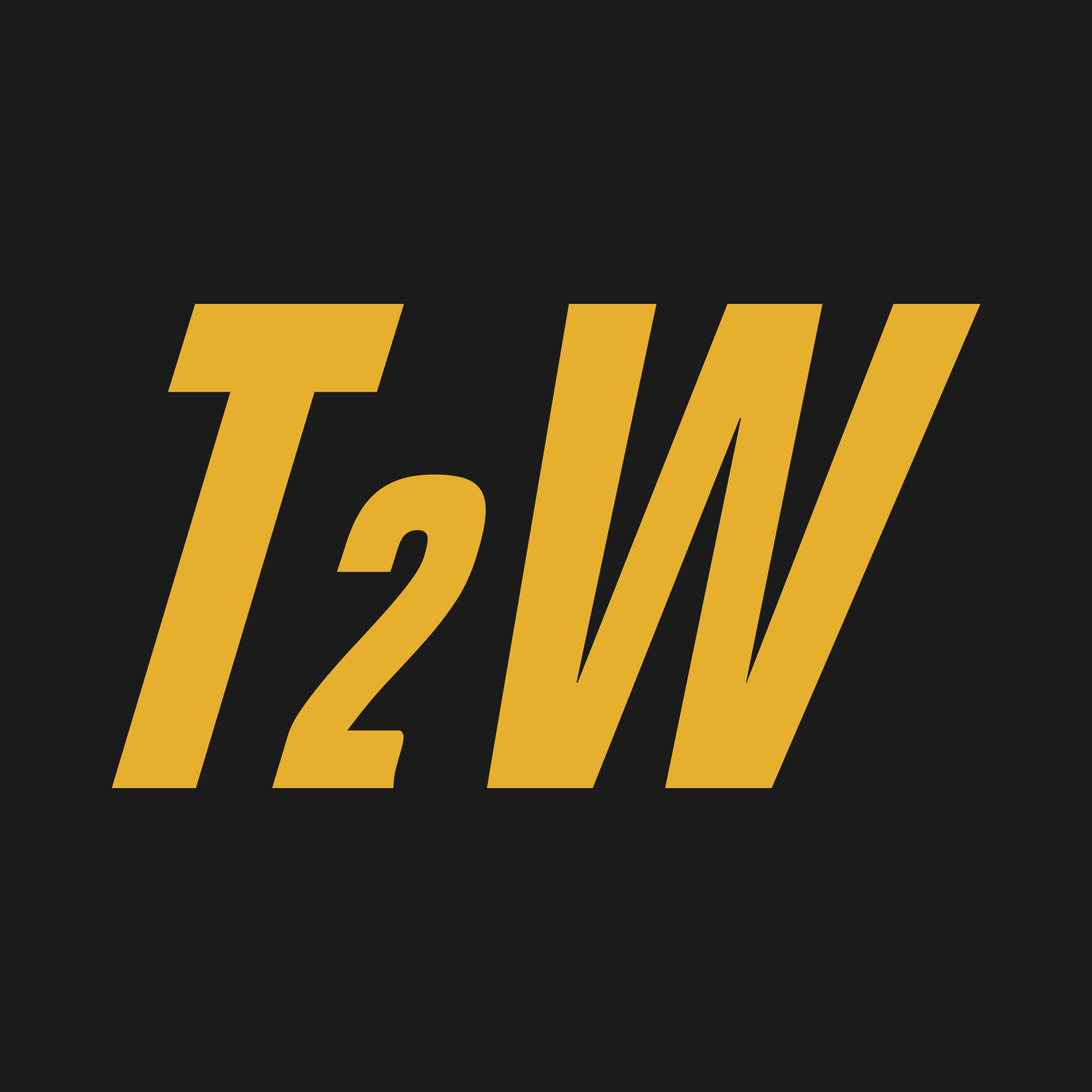
<style>
.page{position:relative;width:1092px;height:1092px;background:#1b1b1b}
.page>*{position:absolute;margin:0}
.t1{font:677.6px "FightThis";color:#e6af2e}
.t2{font:444.3px "FightThis";color:#e6af2e}
</style>
<div class="page">
<p class="t1" style="left:111px;top:304px;width:870px;height:484px">T<span class="t2">2</span>W</p>
</div>
